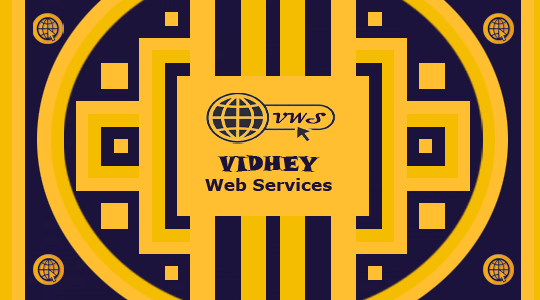
<style>
.page{position:relative;width:540px;height:300px;background:#ffbf31}
.page>*{position:absolute;margin:0}
.t1{font:16.9px "Verdana-Bold";color:#1b133c}
.t2{font:21.2px "SnapITC-Regular";color:#1b133c}
</style>
<div class="page">
<p class="t1" style="left:205px;top:155px;width:127px;height:36px;text-align:center"><span class="t2">VIDHEY<br></span>Web Services</p>
</div>
